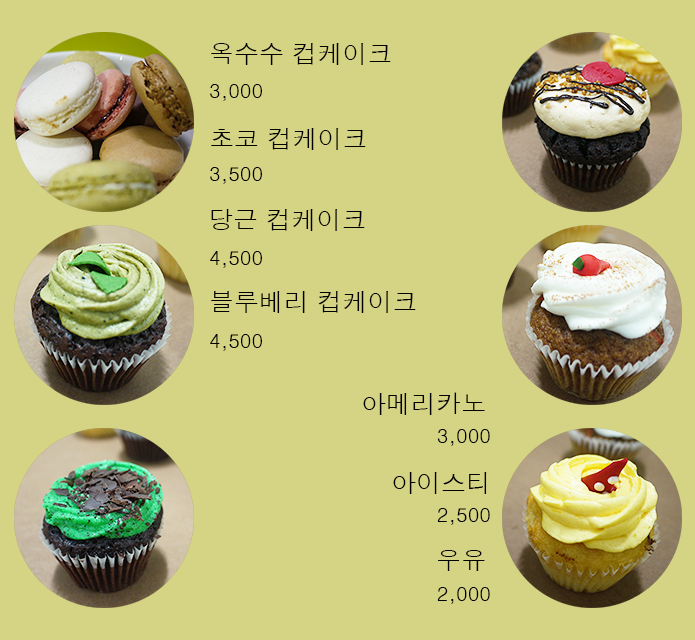
<style>
.page{position:relative;width:695px;height:640px;background:#d5d384}
.page>*{position:absolute;margin:0}
.t1{font:25px "Dotum";color:#000000}
.t2{font:20px "Dotum";color:#000000}
</style>
<div class="page">
<p class="t1" style="left:211px;top:43px;width:180px;height:22px">옥수수 컵케이크</p>
<p class="t2" style="left:210px;top:84px;width:52px;height:17px">3,000</p>
<p class="t1" style="left:211px;top:128px;width:155px;height:22px">초코 컵케이크</p>
<p class="t2" style="left:210px;top:167px;width:52px;height:17px">3,500</p>
<p class="t1" style="left:211px;top:209px;width:154px;height:22px">당근 컵케이크</p>
<p class="t2" style="left:210px;top:251px;width:52px;height:17px">4,500</p>
<p class="t1" style="left:211px;top:291px;width:205px;height:22px">블루베리 컵케이크</p>
<p class="t2" style="left:210px;top:334px;width:52px;height:17px">4,500</p>
<p class="t1" style="left:363px;top:392px;width:122px;height:23px">아메리카노</p>
<p class="t2" style="left:437px;top:429px;width:53px;height:17px">3,000</p>
<p class="t1" style="left:393px;top:472px;width:94px;height:22px">아이스티</p>
<p class="t2" style="left:437px;top:508px;width:53px;height:17px">2,500</p>
<p class="t1" style="left:438px;top:550px;width:47px;height:21px">우유</p>
<p class="t2" style="left:437px;top:587px;width:53px;height:17px">2,000</p>
</div>
